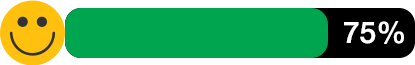
<style>
.page{position:relative;width:415px;height:65px;background:#00a550}
.page>*{position:absolute;margin:0}
.t1{font:30px "HelveticaNeueCyr-Medium";color:#ffffff}
</style>
<div class="page">
<p class="t1" style="left:344px;top:21px;width:60px;height:23px">75%</p>
</div>
